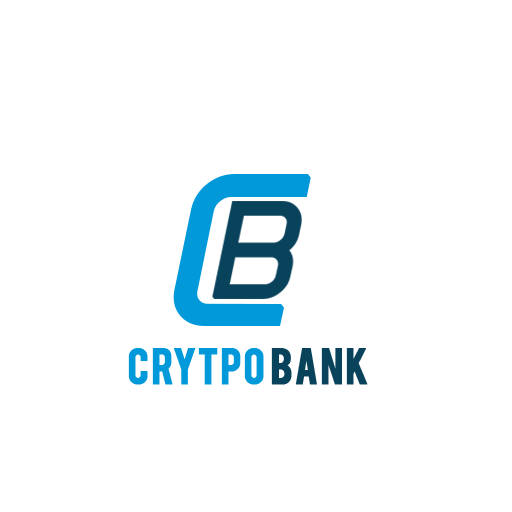
<style>
.page{position:relative;width:512px;height:512px;background:#ffffff}
.page>*{position:absolute;margin:0}
.t1{font:219px "HallFeticaItalic";color:#0199da;font-weight:bold}
.t2{font:40px "Bebas";color:#0199da;font-weight:bold;scale:1.04 1}
.t3{font:40px "Bebas";color:#08425b;font-weight:bold;scale:1.04 1}
</style>
<div class="page">
<p class="t1" style="left:173px;top:174px;width:138px;height:152px">C</p>
<p class="t2" style="left:128px;top:348px;width:240px;height:37px">CRYTPO <span class="t3">Bank</span></p>
</div>
